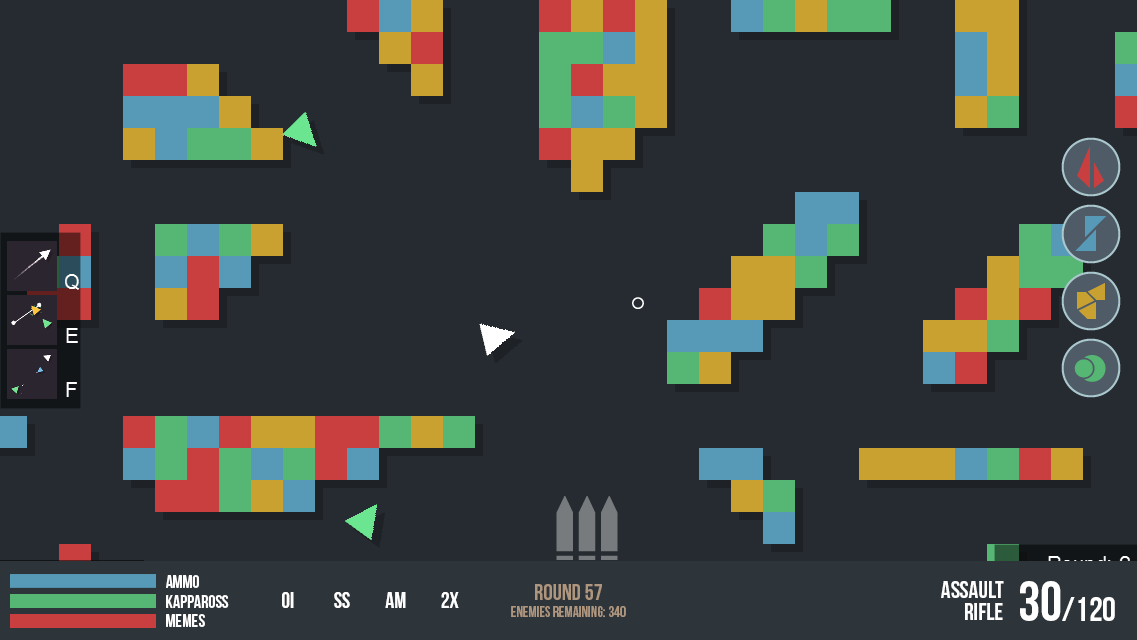
<style>
.page{position:relative;width:1137px;height:640px;background:#252b30}
.page>*{position:absolute;margin:0}
.t1{font:18px "BebasNeue";color:#ffffff}
.t2{font:24px/22px "BebasNeue";color:#ffffff}
.t3{font:34px "BebasNeue";color:#ffffff}
.t4{font:56px "BebasNeue";color:#ffffff}
.t5{font:22px "BebasNeueBold";color:#ffffff}
.t6{font:15px/17px "BebasNeue";color:#ad957e}
.t7{font:23px/17px "BebasNeue";color:#ad957e}
</style>
<div class="page">
<p class="t1" style="left:166px;top:575px;width:33px;height:13px">ammo</p>
<p class="t2" style="left:941px;top:581px;width:63px;height:39px;text-align:right">assault<br>rifle</p>
<p class="t3" style="left:1020px;top:581px;width:95px;height:40px"><span class="t4">30</span>/120</p>
<p class="t5" style="left:282px;top:592px;width:12px;height:16px">oi</p>
<p class="t5" style="left:334px;top:592px;width:16px;height:16px">ss</p>
<p class="t5" style="left:385px;top:592px;width:21px;height:16px">am</p>
<p class="t5" style="left:441px;top:592px;width:18px;height:16px">2X</p>
<p class="t6" style="left:511px;top:584px;width:115px;height:33px;text-align:center"><span class="t7">round 57<br></span>enemies remaining: 340</p>
<p class="t1" style="left:166px;top:595px;width:63px;height:13px">kappaross</p>
<p class="t1" style="left:166px;top:614px;width:39px;height:13px">memes</p>
</div>
